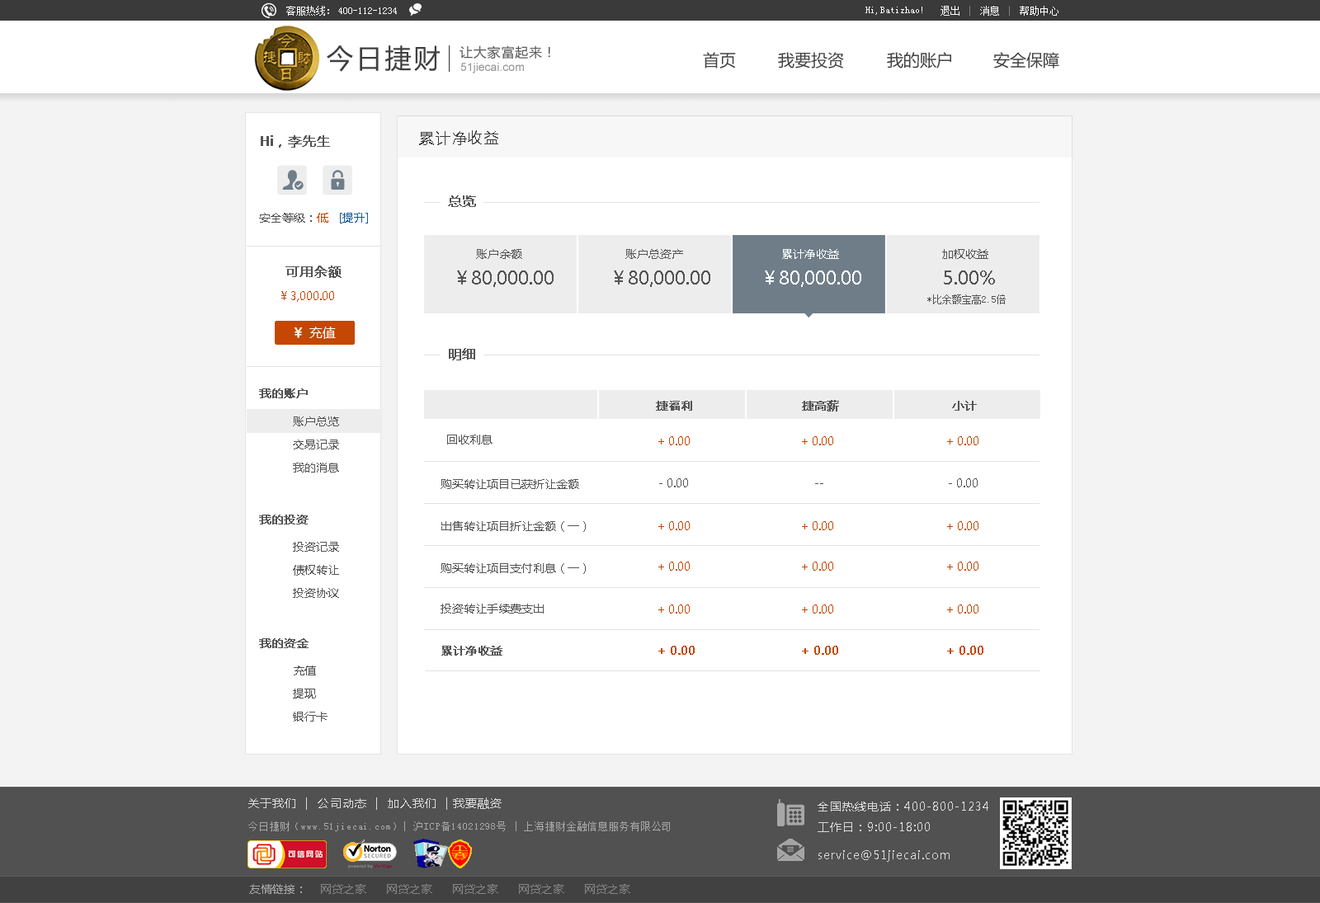
<style>
.page{position:relative;width:1320px;height:903px;background:#ffffff}
.page>*{position:absolute;margin:0}
.t1{font:9.9px "SimSun";color:#ffffff}
.t2{font:26.4px "MicrosoftYaHei";letter-spacing:0.1em;color:#3f3f3f}
.t3{font:13.2px "MicrosoftYaHei";letter-spacing:0.05em;color:#575757}
.t4{font:16.5px "MicrosoftYaHei";color:#414141}
.t5{font:11.5px "ArialMT";color:#969697}
.t6{font:13.2px "MicrosoftYaHei";color:#545454;font-weight:bold}
.t7{font:14.8px "MicrosoftYaHei";letter-spacing:0.1em;color:#3f3f3f}
.t8{font:11.5px "MicrosoftYaHei";color:#545454}
.t9{font:11.5px "MicrosoftYaHei";color:#c44704}
.t10{font:11.5px "MicrosoftYaHei";color:#175a94}
.t11{font:11.5px "MicrosoftYaHei";color:#ffffff}
.t12{font:18.1px "MicrosoftYaHei";color:#545454}
.t13{font:18.1px "MicrosoftYaHei";color:#ffffff}
.t14{font:11.5px "MicrosoftYaHei";color:#c44703}
.t15{font:9.9px "SimSun";color:#545454}
.t16{font:13.2px "MicrosoftYaHei";color:#ffffff}
.t17{font:13.2px "MicrosoftYaHei";color:#ffffff;font-weight:bold}
.t18{font:11.5px "MicrosoftYaHei";color:#545454;font-weight:bold}
.t19{font:11.5px/23.1px "MicrosoftYaHei";color:#545454}
.t20{font:11.5px "MicrosoftYaHei";color:#c44704;font-weight:bold}
.t21{font:11.5px "MicrosoftYaHei";letter-spacing:0.07em;color:#dbdbdb}
.t22{font:11.5px "MicrosoftYaHei";letter-spacing:0.07em;color:#dadada}
.t23{font:9.9px "SimSun";letter-spacing:0.07em;color:#a7a7a7}
.t24{font:11.5px "MicrosoftYaHei";color:#858484}
.t25{font:11.5px "MicrosoftYaHei";color:#a7a7a7}
</style>
<div class="page">
<p class="t1" style="left:286px;top:6px;width:43px;height:10px">客服热线：</p>
<p class="t1" style="left:940px;top:6px;width:118px;height:10px">退出    消息    帮助中心</p>
<p class="t1" style="left:338px;top:7px;width:59px;height:7px">400-112-1234</p>
<p class="t1" style="left:865px;top:7px;width:57px;height:8px">Hi,Batizhao!</p>
<p class="t2" style="left:327px;top:45px;width:113px;height:27px">今日捷财</p>
<p class="t3" style="left:460px;top:45px;width:90px;height:14px">让大家富起来！</p>
<p class="t4" style="left:703px;top:52px;width:33px;height:16px">首页</p>
<p class="t4" style="left:778px;top:52px;width:66px;height:16px">我要投资</p>
<p class="t4" style="left:887px;top:52px;width:64px;height:16px">我的账户</p>
<p class="t4" style="left:993px;top:52px;width:66px;height:16px">安全保障</p>
<p class="t5" style="left:460px;top:63px;width:64px;height:10px">51jiecai.com</p>
<p class="t6" style="left:261px;top:135px;width:69px;height:13px">Hi，李先生</p>
<p class="t7" style="left:419px;top:130px;width:79px;height:15px">累计净收益</p>
<p class="t6" style="left:448px;top:196px;width:28px;height:11px">总览</p>
<p class="t8" style="left:259px;top:213px;width:109px;height:11px">安全等级：<span class="t9">低   </span><span class="t10">[提升]</span></p>
<p class="t8" style="left:476px;top:249px;width:46px;height:10px">账户余额</p>
<p class="t8" style="left:625px;top:249px;width:58px;height:10px">账户总资产</p>
<p class="t11" style="left:782px;top:249px;width:57px;height:10px">累计净收益</p>
<p class="t8" style="left:942px;top:249px;width:46px;height:10px">加权收益</p>
<p class="t6" style="left:285px;top:266px;width:57px;height:12px">可用余额</p>
<p class="t12" style="left:457px;top:271px;width:97px;height:16px">￥80,000.00</p>
<p class="t12" style="left:614px;top:271px;width:96px;height:16px">￥80,000.00</p>
<p class="t13" style="left:765px;top:271px;width:96px;height:16px">￥80,000.00</p>
<p class="t12" style="left:944px;top:271px;width:51px;height:14px">5.00%</p>
<p class="t14" style="left:281px;top:291px;width:53px;height:11px">￥3,000.00</p>
<p class="t15" style="left:927px;top:295px;width:79px;height:9px">*比余额宝高2.5倍</p>
<p class="t16" style="left:294px;top:327px;width:42px;height:12px"><span class="t17">￥ </span>充值</p>
<p class="t6" style="left:449px;top:348px;width:26px;height:13px">明细</p>
<p class="t18" style="left:259px;top:389px;width:49px;height:9px">我的账户</p>
<p class="t18" style="left:656px;top:401px;width:36px;height:10px">捷福利</p>
<p class="t18" style="left:802px;top:400px;width:37px;height:12px">捷高薪</p>
<p class="t18" style="left:952px;top:401px;width:25px;height:10px">小计</p>
<p class="t19" style="left:293px;top:417px;width:46px;height:56px">账户总览<br>交易记录<br>我的消息</p>
<p class="t8" style="left:447px;top:435px;width:46px;height:10px">回收利息</p>
<p class="t9" style="left:658px;top:436px;width:32px;height:9px">+ 0.00</p>
<p class="t9" style="left:802px;top:436px;width:31px;height:9px">+ 0.00</p>
<p class="t9" style="left:947px;top:436px;width:31px;height:9px">+ 0.00</p>
<p class="t8" style="left:441px;top:479px;width:138px;height:10px">购买转让项目已获折让金额</p>
<p class="t8" style="left:659px;top:478px;width:29px;height:10px">- 0.00</p>
<p class="t8" style="left:815px;top:483px;width:8px;height:1px">--</p>
<p class="t8" style="left:949px;top:478px;width:29px;height:10px">- 0.00</p>
<p class="t18" style="left:259px;top:515px;width:50px;height:10px">我的投资</p>
<p class="t8" style="left:441px;top:521px;width:145px;height:11px">出售转让项目折让金额（一）</p>
<p class="t9" style="left:658px;top:521px;width:32px;height:9px">+ 0.00</p>
<p class="t9" style="left:802px;top:521px;width:31px;height:9px">+ 0.00</p>
<p class="t9" style="left:947px;top:521px;width:31px;height:9px">+ 0.00</p>
<p class="t19" style="left:293px;top:542px;width:46px;height:56px">投资记录<br>债权转让<br>投资协议</p>
<p class="t8" style="left:441px;top:563px;width:145px;height:11px">购买转让项目支付利息（一）</p>
<p class="t9" style="left:658px;top:562px;width:32px;height:9px">+ 0.00</p>
<p class="t9" style="left:802px;top:562px;width:31px;height:9px">+ 0.00</p>
<p class="t9" style="left:947px;top:562px;width:31px;height:9px">+ 0.00</p>
<p class="t8" style="left:441px;top:604px;width:103px;height:10px">投资转让手续费支出</p>
<p class="t9" style="left:658px;top:605px;width:32px;height:9px">+ 0.00</p>
<p class="t9" style="left:802px;top:605px;width:31px;height:9px">+ 0.00</p>
<p class="t9" style="left:947px;top:605px;width:31px;height:9px">+ 0.00</p>
<p class="t18" style="left:259px;top:639px;width:50px;height:9px">我的资金</p>
<p class="t18" style="left:441px;top:646px;width:61px;height:10px">累计净收益</p>
<p class="t20" style="left:658px;top:646px;width:37px;height:9px">+ 0.00</p>
<p class="t20" style="left:802px;top:646px;width:36px;height:9px">+ 0.00</p>
<p class="t20" style="left:947px;top:646px;width:36px;height:9px">+ 0.00</p>
<p class="t19" style="left:293px;top:666px;width:35px;height:56px">充值<br>提现<br>银行卡</p>
<p class="t21" style="left:248px;top:798px;width:254px;height:12px">关于我们  |  公司动态  |  加入我们  | 我要融资</p>
<p class="t22" style="left:818px;top:802px;width:170px;height:30px">全国热线电话：400-800-1234<br>工作日：9:00-18:00</p>
<p class="t23" style="left:248px;top:822px;width:422px;height:10px">今日捷财（www.51jiecai.com）| 沪ICP备14021298号 | 上海捷财金融信息服务有限公司</p>
<p class="t22" style="left:818px;top:851px;width:132px;height:11px">service@51jiecai.com</p>
<p class="t24" style="left:249px;top:884px;width:381px;height:10px"><span class="t25">友情链接：</span>    网贷之家      网贷之家      网贷之家      网贷之家      网贷之家</p>
</div>
